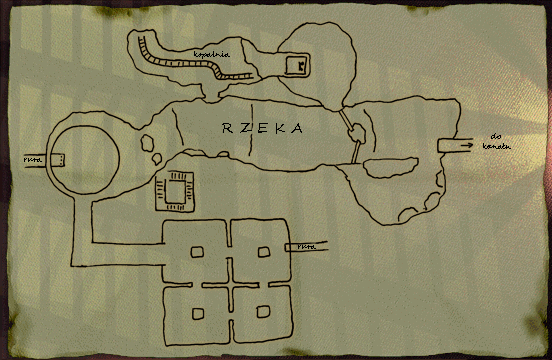
<style>
.page{position:relative;width:552px;height:360px;background:#8c8c6c}
.page>*{position:absolute;margin:0}
.t1{font:8px "SegoeScript";color:#000000}
.t2{font:14px "SegoeScript";color:#000000}
</style>
<div class="page">
<p class="t1" style="left:194px;top:51px;width:36px;height:8px">kopalnia</p>
<p class="t2" style="left:222px;top:123px;width:80px;height:11px">R Z E K A</p>
<p class="t1" style="left:483px;top:133px;width:28px;height:16px;text-align:center">do <br>kanału</p>
<p class="t1" style="left:24px;top:158px;width:18px;height:4px">rura</p>
<p class="t1" style="left:298px;top:245px;width:18px;height:4px">rura</p>
</div>
